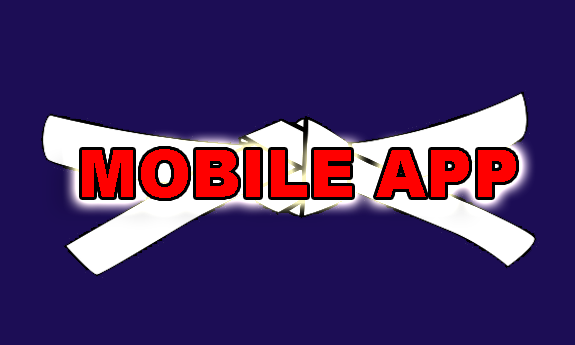
<style>
.page{position:relative;width:575px;height:345px;background:#1c0d55}
.page>*{position:absolute;margin:0}
.t1{font:66.2px "Arial-Black";color:#ff0000;scale:0.97 1}
.t2{font:66.2px "Arial-Black";color:#e5e5e5;scale:0.97 1}
</style>
<div class="page">
<p class="t1" style="left:82px;top:149px;width:434px;height:49px"><span class="t2"><br></span>MOBILE APP</p>
</div>
